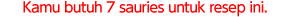
<style>
.page{position:relative;width:290px;height:17px;background:#ffffff}
.page>*{position:absolute;margin:0}
.t1{font:14px "UDShinGoPro-Medium";letter-spacing:-0.04em;color:#ff0000}
</style>
<div class="page">
<p class="t1" style="left:23px;top:1px;width:244px;height:16px">Kamu butuh 7 sauries untuk resep ini.</p>
</div>
